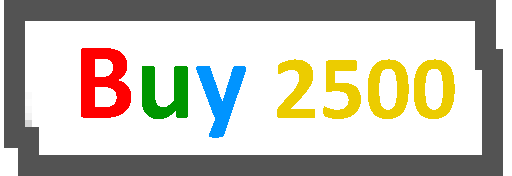
<style>
.page{position:relative;width:512px;height:176px;background:#ffffff}
.page>*{position:absolute;margin:0}
.t1{font:90.7px "Calibri-Bold";color:#eccc00}
.t2{font:110.7px "Calibri-Bold";color:#ff0000}
.t3{font:110.7px "Calibri-Bold";color:#009700}
.t4{font:110.7px "Calibri-Bold";color:#0094ff}
</style>
<div class="page">
<p class="t1" style="left:81px;top:48px;width:374px;height:90px"><span class="t2">B</span><span class="t3">u</span><span class="t4">y </span>2500</p>
</div>
